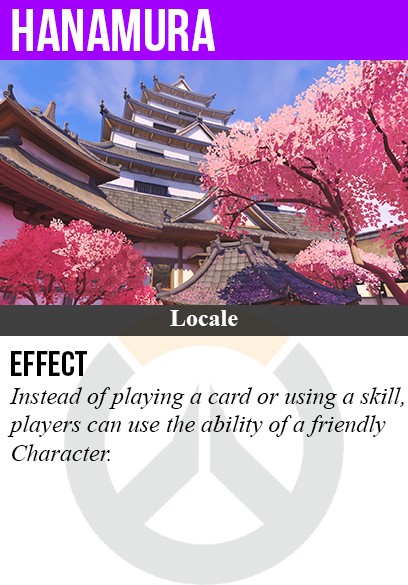
<style>
.page{position:relative;width:408px;height:585px;background:#ffffff}
.page>*{position:absolute;margin:0}
.t1{font:60px "BebasNeue";color:#ffffff}
.t2{font:24px "TimesNewRomanPS-BoldMT";color:#ffffff}
.t3{font:36px "BebasNeue";color:#000000}
.t4{font:24px "TimesNewRomanPS-ItalicMT";color:#000000}
</style>
<div class="page">
<p class="t1" style="left:12px;top:9px;width:203px;height:42px">hanamura</p>
<p class="t2" style="left:170px;top:310px;width:68px;height:16px">Locale</p>
<p class="t3" style="left:11px;top:351px;width:76px;height:25px">Effect</p>
<p class="t4" style="left:7px;top:387px;width:397px;height:74px">Instead of playing a card or using a skill,<br>players can use the ability of a friendly<br>Character.</p>
</div>
